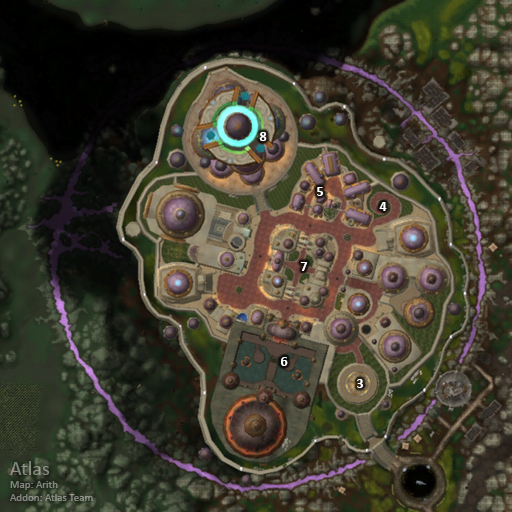
<style>
.page{position:relative;width:512px;height:512px}
.page>*{position:absolute;margin:0}
.t1{font:14px "Calibri-Bold";color:#ffffff}
.t2{font:11px "Calibri";color:#838980}
.t3{font:20px "Calibri";color:#838980}
</style>
<div class="page">
<p class="t1" style="left:259px;top:132px;width:8px;height:9px">8</p>
<p class="t1" style="left:317px;top:187px;width:6px;height:9px">5</p>
<p class="t1" style="left:379px;top:202px;width:8px;height:9px">4</p>
<p class="t1" style="left:300px;top:262px;width:8px;height:9px">7</p>
<p class="t1" style="left:281px;top:357px;width:7px;height:9px">6</p>
<p class="t1" style="left:357px;top:379px;width:6px;height:9px">3</p>
<p class="t2" style="left:10px;top:461px;width:83px;height:40px"><span class="t3">Atlas<br></span>Map: Arith<br>Addon: Atlas Team</p>
</div>
